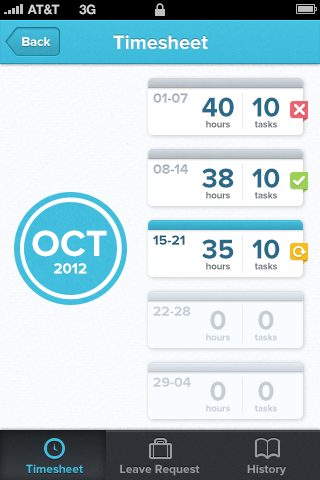
<style>
.page{position:relative;width:320px;height:480px}
.page>*{position:absolute;margin:0}
.t1{font:13px "HelveticaNeue-Bold";color:#d4d4d4;text-transform:uppercase}
.t2{font:13px "ProximaNova-Bold";color:#ffffff}
.t3{font:20px "ProximaNova-Bold";color:#ffffff}
.t4{font:13.8px "ProximaNova-Bold";color:#afb9c2}
.t5{font:28.2px "ProximaNova-Bold";color:#2a6a88;scale:0.97 1}
.t6{font:10px "ProximaNova-Bold";color:#6f7276;scale:0.95 1}
.t7{font:38px "ProximaNova-Bold";color:#ffffff}
.t8{font:13.8px "ProximaNova-Bold";color:#2a6a88}
.t9{font:15px "ProximaNova-Bold";color:#ffffff}
.t10{font:13.8px "ProximaNova-Bold";color:#c6cdd5}
.t11{font:28.2px "ProximaNova-Bold";color:#c6cdd5;scale:0.97 1}
.t12{font:10px "ProximaNova-Bold";color:#c6cdd5;scale:0.95 1}
.t13{font:12px "ProximaNova-Bold";color:#41bedd}
.t14{font:12px "ProximaNova-Bold";color:#959ca3}
</style>
<div class="page">
<p class="t1" style="left:27px;top:4px;width:33px;height:11px">AT&amp;t</p>
<p class="t1" style="left:79px;top:4px;width:17px;height:11px">3G</p>
<p class="t2" style="left:22px;top:37px;width:29px;height:9px">Back</p>
<p class="t3" style="left:113px;top:35px;width:95px;height:14px">Timesheet</p>
<p class="t4" style="left:153px;top:93px;width:35px;height:10px">01-07</p>
<p class="t5" style="left:202px;top:97px;width:32px;height:20px">40</p>
<p class="t5" style="left:252px;top:97px;width:28px;height:20px">10</p>
<p class="t6" style="left:206px;top:120px;width:24px;height:8px">hours</p>
<p class="t6" style="left:254px;top:120px;width:23px;height:8px">tasks</p>
<p class="t4" style="left:153px;top:164px;width:35px;height:10px">08-14</p>
<p class="t5" style="left:202px;top:168px;width:32px;height:20px">38</p>
<p class="t5" style="left:252px;top:168px;width:28px;height:20px">10</p>
<p class="t6" style="left:206px;top:191px;width:24px;height:8px">hours</p>
<p class="t6" style="left:254px;top:191px;width:23px;height:8px">tasks</p>
<p class="t7" style="left:32px;top:230px;width:75px;height:27px">OCT</p>
<p class="t8" style="left:153px;top:235px;width:32px;height:10px">15-21</p>
<p class="t5" style="left:202px;top:239px;width:32px;height:20px">35</p>
<p class="t5" style="left:252px;top:239px;width:28px;height:20px">10</p>
<p class="t9" style="left:54px;top:263px;width:33px;height:11px">2012</p>
<p class="t6" style="left:206px;top:262px;width:24px;height:8px">hours</p>
<p class="t6" style="left:254px;top:262px;width:23px;height:8px">tasks</p>
<p class="t10" style="left:153px;top:306px;width:38px;height:10px">22-28</p>
<p class="t11" style="left:210px;top:310px;width:16px;height:20px">0</p>
<p class="t11" style="left:258px;top:310px;width:16px;height:20px">0</p>
<p class="t12" style="left:206px;top:333px;width:24px;height:8px">hours</p>
<p class="t12" style="left:254px;top:333px;width:23px;height:8px">tasks</p>
<p class="t10" style="left:153px;top:377px;width:38px;height:10px">29-04</p>
<p class="t11" style="left:210px;top:381px;width:16px;height:20px">0</p>
<p class="t11" style="left:258px;top:381px;width:16px;height:20px">0</p>
<p class="t12" style="left:206px;top:404px;width:24px;height:8px">hours</p>
<p class="t12" style="left:254px;top:404px;width:23px;height:8px">tasks</p>
<p class="t13" style="left:26px;top:464px;width:57px;height:9px">Timesheet</p>
<p class="t13" style="left:26px;top:464px;width:57px;height:9px">Timesheet</p>
<p class="t14" style="left:120px;top:464px;width:80px;height:12px">Leave Request</p>
<p class="t14" style="left:247px;top:464px;width:39px;height:12px">History</p>
</div>
